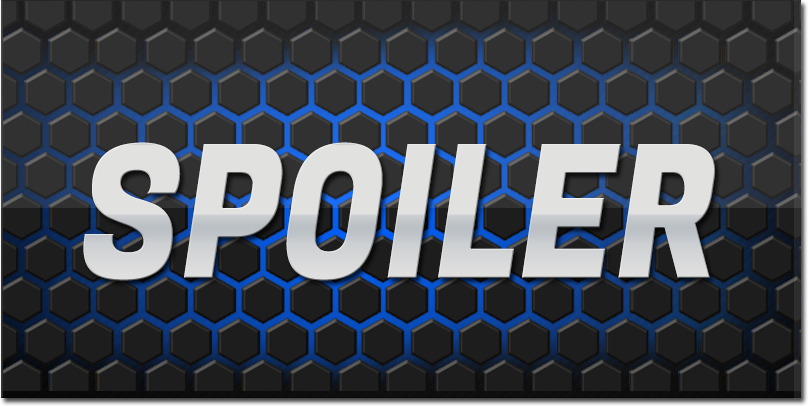
<style>
.page{position:relative;width:808px;height:406px;background:#313131}
.page>*{position:absolute;margin:0}
.t1{font:185.7px "FugazOne-Regular";color:#dfdfdf;scale:0.84 1}
</style>
<div class="page">
<p class="t1" style="left:83px;top:142px;width:632px;height:139px">SPOILER</p>
</div>
